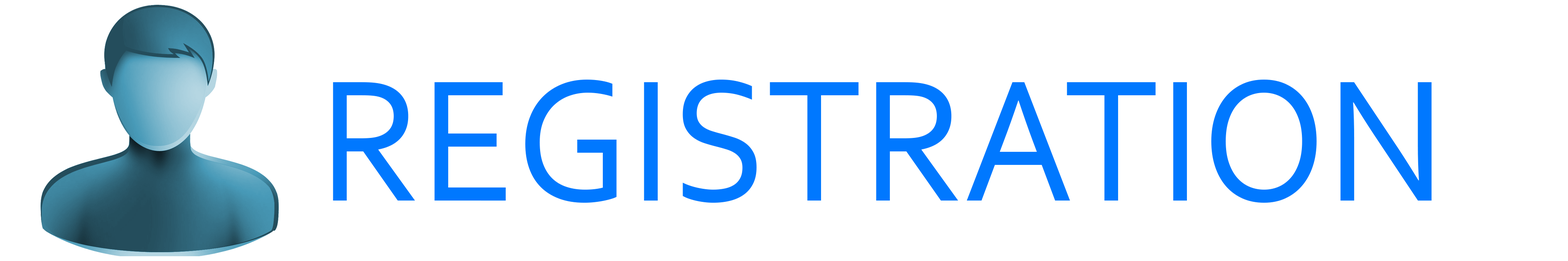
<style>
.page{position:relative;width:1568px;height:261px;background:#ffffff}
.page>*{position:absolute;margin:0}
.t1{font:181.8px "Corbel";color:#0078ff;scale:0.94 1}
</style>
<div class="page">
<p class="t1" style="left:333px;top:79px;width:1099px;height:124px">REGISTRATION</p>
</div>
